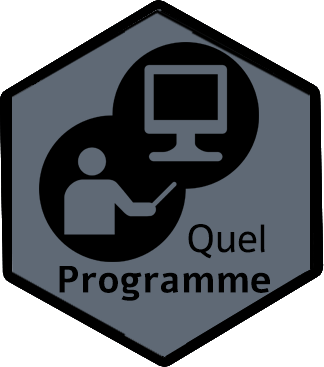
<style>
.page{position:relative;width:324px;height:367px;background:#5f6975}
.page>*{position:absolute;margin:0}
.t1{font:39px "Alef-Regular";color:#000000}
.t2{font:37.5px "Alef-Bold";color:#000000}
</style>
<div class="page">
<p class="t1" style="left:188px;top:224px;width:77px;height:35px">Quel</p>
<p class="t2" style="left:59px;top:266px;width:211px;height:35px">Programme</p>
</div>
